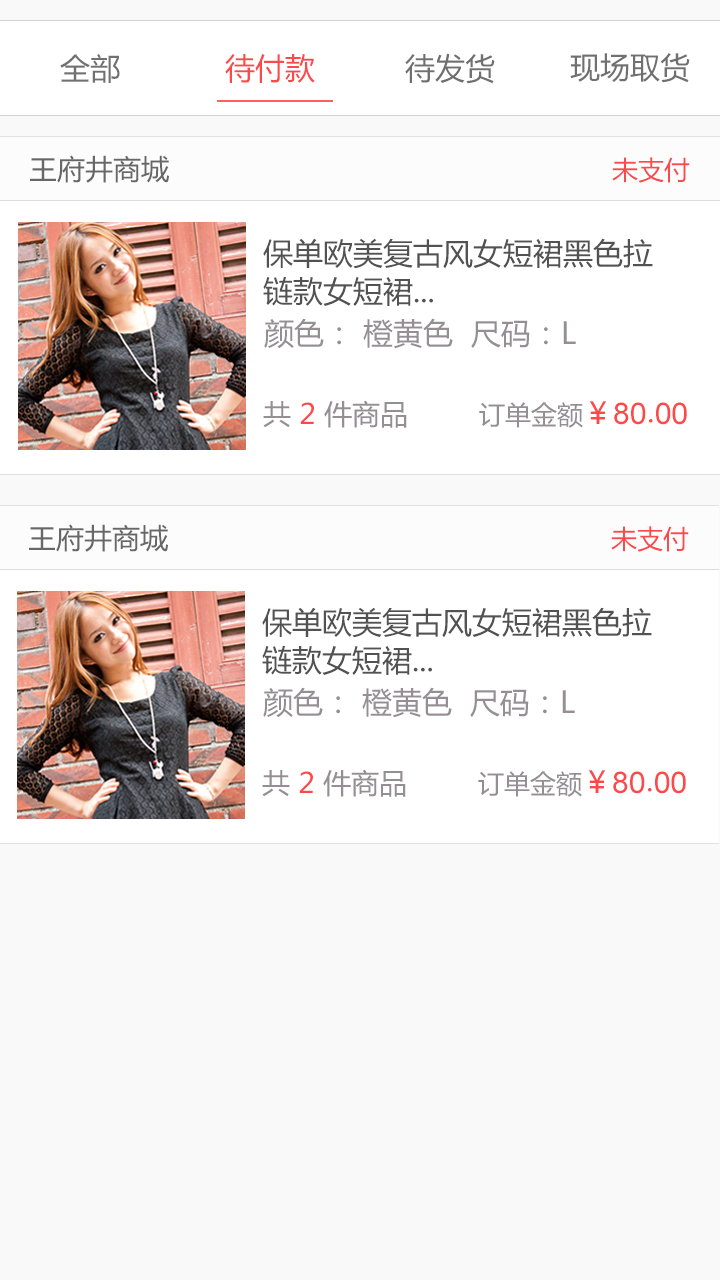
<style>
.page{position:relative;width:720px;height:1280px;background:#f9f9f9}
.page>*{position:absolute;margin:0}
.t1{font:30px "MicrosoftYaHei";color:#707070}
.t2{font:30px "MicrosoftYaHei";color:#fc4a4a}
.t3{font:28px "MicrosoftYaHei";color:#666666}
.t4{font:26px "MicrosoftYaHei";color:#fc4a4a}
.t5{font:30px/38px "MicrosoftYaHei";color:#525252}
.t6{font:30px "MicrosoftYaHei";color:#958f93}
.t7{font:28px "MicrosoftYaHei";color:#958f93}
.t8{font:28px "MicrosoftYaHei";color:#fc4a4a}
.t9{font:26px "MicrosoftYaHei";color:#958f93}
.t10{font:30px "ArialMT";color:#fc4a4a}
.t11{font:30px "STHeitiSC-Light";color:#fc4a4a}
</style>
<div class="page">
<p class="t1" style="left:60px;top:54px;width:60px;height:29px">全部</p>
<p class="t2" style="left:225px;top:54px;width:90px;height:29px">待付款</p>
<p class="t1" style="left:405px;top:53px;width:90px;height:31px">待发货</p>
<p class="t1" style="left:570px;top:53px;width:120px;height:30px">现场取货</p>
<p class="t3" style="left:30px;top:155px;width:139px;height:28px">王府井商城</p>
<p class="t4" style="left:612px;top:157px;width:78px;height:26px">未支付</p>
<p class="t5" style="left:263px;top:238px;width:390px;height:68px">保单欧美复古风女短裙黑色拉<br>链款女短裙...</p>
<p class="t6" style="left:264px;top:318px;width:312px;height:31px">颜色： 橙黄色  尺码：L</p>
<p class="t7" style="left:263px;top:400px;width:144px;height:28px">共 <span class="t8">2 </span>件商品</p>
<p class="t9" style="left:479px;top:401px;width:208px;height:27px">订单金额<span class="t2">￥</span><span class="t10">80</span><span class="t11">.</span><span class="t10">00</span></p>
<p class="t3" style="left:29px;top:524px;width:139px;height:28px">王府井商城</p>
<p class="t4" style="left:611px;top:526px;width:78px;height:26px">未支付</p>
<p class="t5" style="left:262px;top:607px;width:390px;height:68px">保单欧美复古风女短裙黑色拉<br>链款女短裙...</p>
<p class="t6" style="left:263px;top:687px;width:312px;height:31px">颜色： 橙黄色  尺码：L</p>
<p class="t7" style="left:262px;top:769px;width:144px;height:28px">共 <span class="t8">2 </span>件商品</p>
<p class="t9" style="left:478px;top:770px;width:208px;height:27px">订单金额<span class="t2">￥</span><span class="t10">80</span><span class="t11">.</span><span class="t10">00</span></p>
</div>
